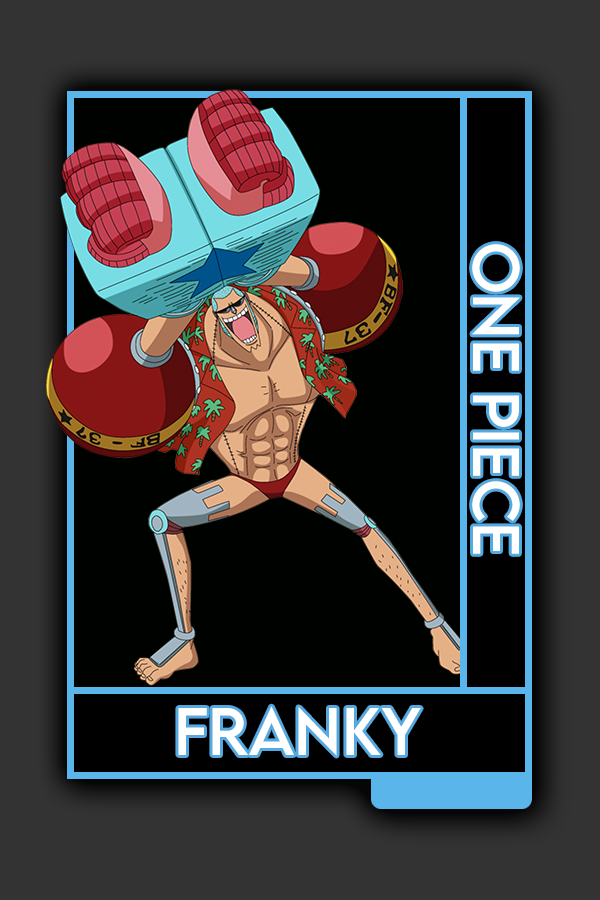
<style>
.page{position:relative;width:600px;height:900px;background:#333333}
.page>*{position:absolute;margin:0}
.t1{font:58.4px "LEMONMILK-Regular";color:#ffffff}
.t2{font:60.3px "LEMONMILK-Regular";color:#ffffff}
</style>
<div class="page">
<p class="t1" style="left:472px;top:244px;width:48px;height:310px;rotate:90deg">One Piece</p>
<p class="t2" style="left:178px;top:706px;width:243px;height:50px">Franky</p>
</div>
